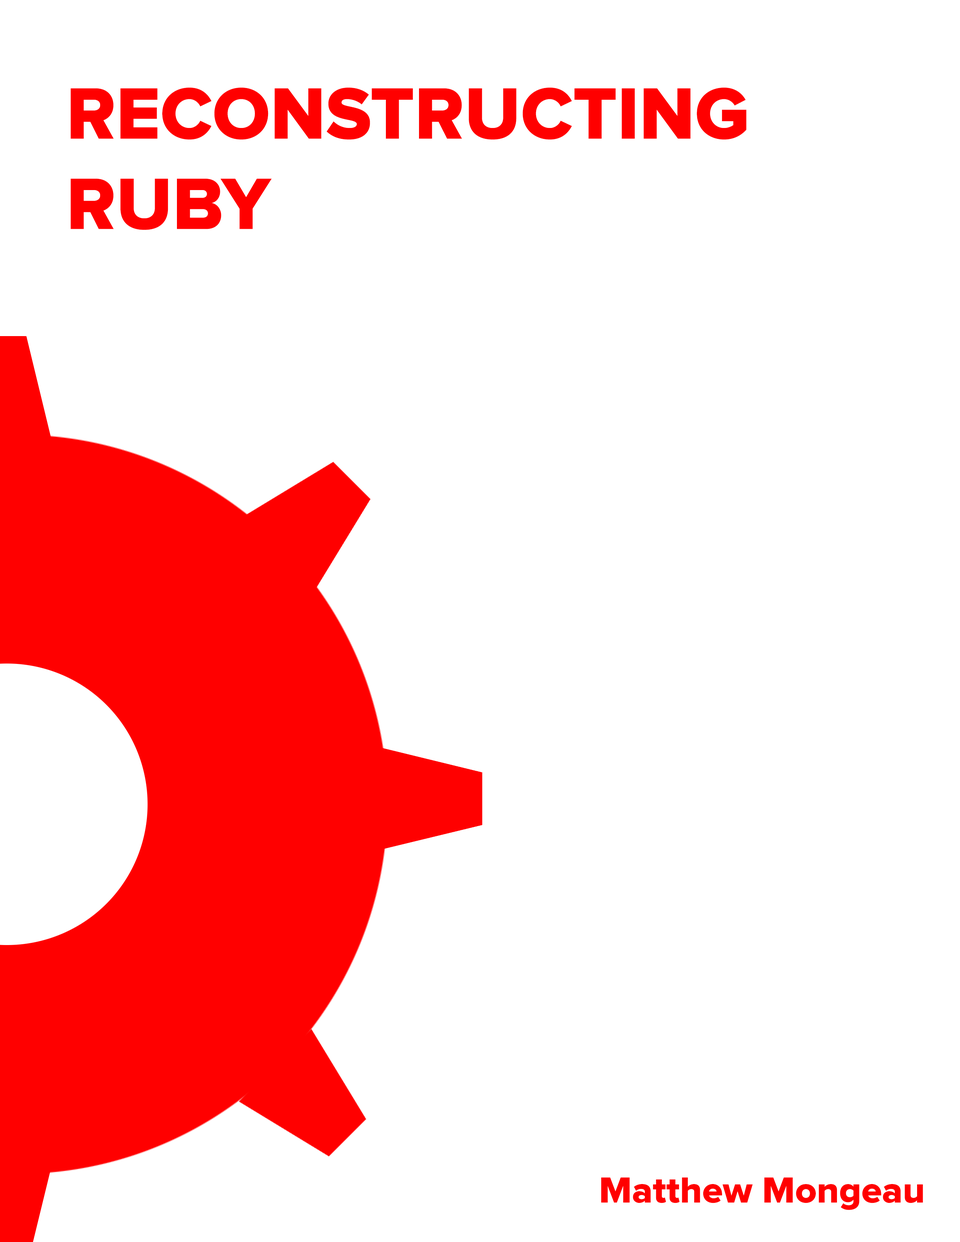
<style>
.page{position:relative;width:960px;height:1242px;background:#ffffff}
.page>*{position:absolute;margin:0}
.t1{font:75.3px "ProximaNova-Extrabld";color:#ff0000}
.t2{font:37.6px "ProximaNova-Extrabld";color:#ff0000}
</style>
<div class="page">
<p class="t1" style="left:70px;top:87px;width:676px;height:143px">RECONSTRUCTING<br>RUBY</p>
<p class="t2" style="left:601px;top:1177px;width:322px;height:33px">Matthew Mongeau</p>
</div>
